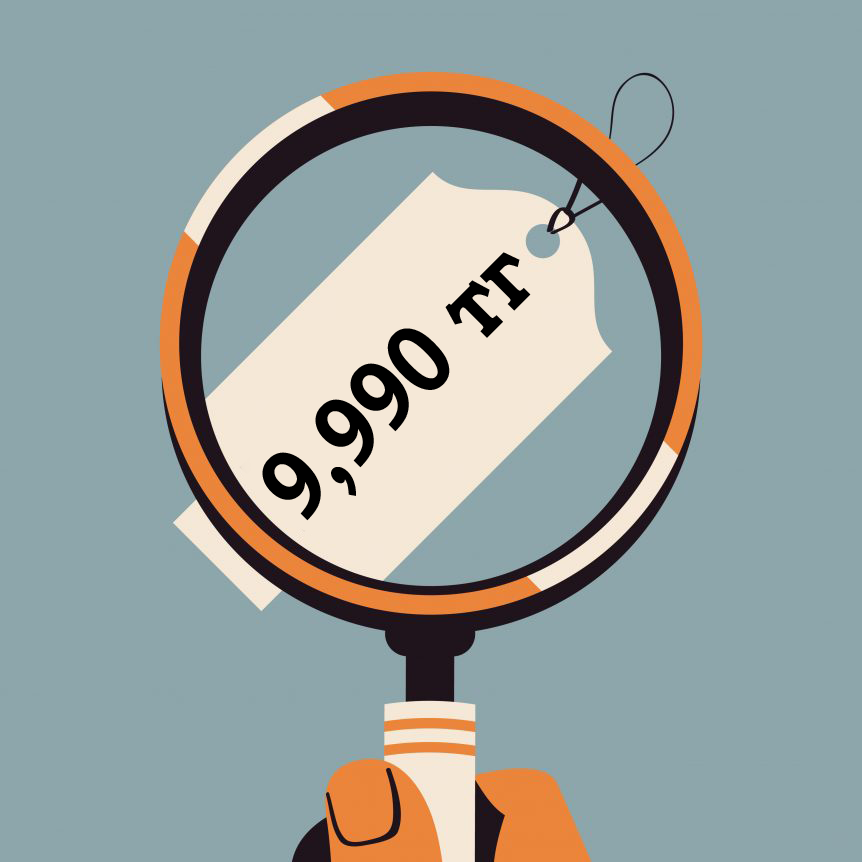
<style>
.page{position:relative;width:862px;height:862px;background:#8da6ab}
.page>*{position:absolute;margin:0}
.t1{font:100.1px "BookmanOldStyle-Bold";color:#000000;scale:0.76 1}
</style>
<div class="page">
<p class="t1" style="left:262px;top:252px;width:269px;height:269px;rotate:-45deg">9,990 тг</p>
</div>
